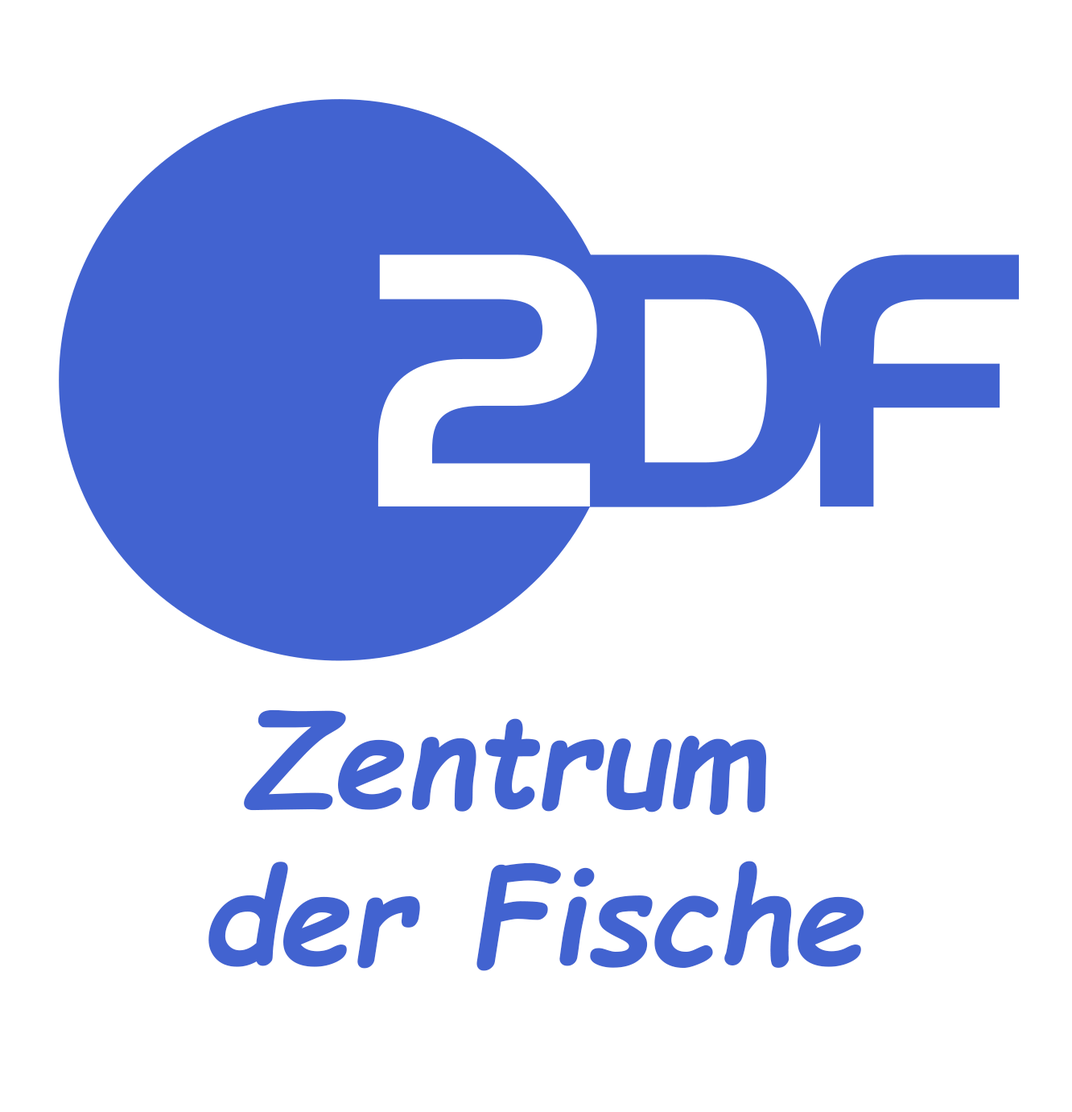
<style>
.page{position:relative;width:1072px;height:1112px;background:#ffffff}
.page>*{position:absolute;margin:0}
.t1{font:130.9px "ComicSansMS-BoldItalic";color:#4263d0}
</style>
<div class="page">
<p class="t1" style="left:209px;top:709px;width:656px;height:262px;text-align:center">Zentrum <br>der Fische</p>
</div>
